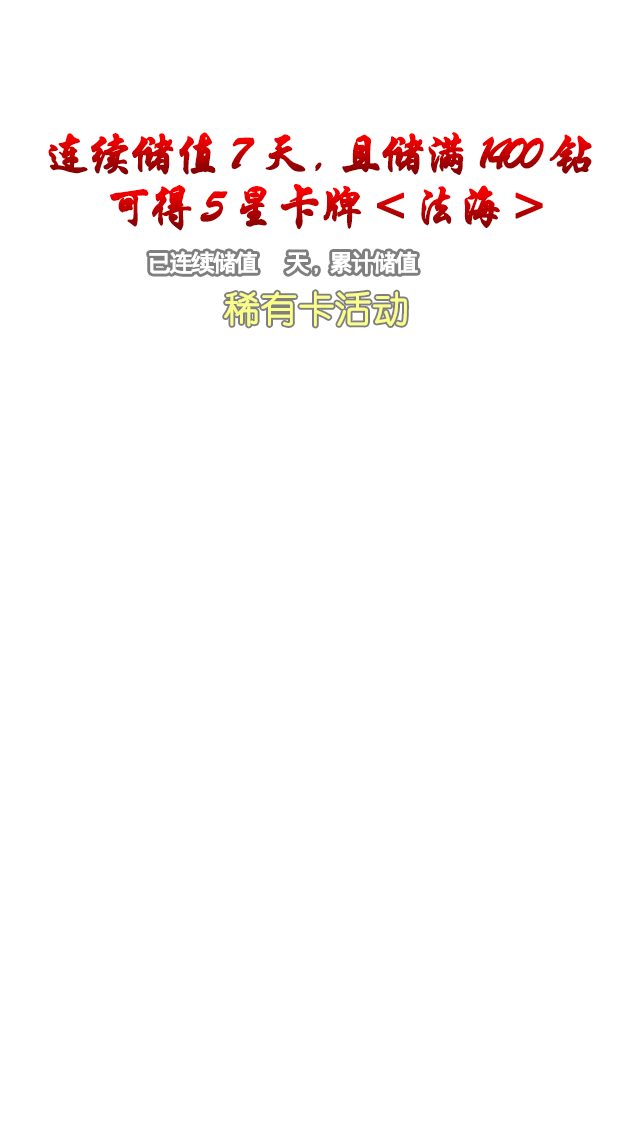
<style>
.page{position:relative;width:640px;height:1136px;background:#ffffff}
.page>*{position:absolute;margin:0}
.t1{font:48px "STXingkai";letter-spacing:-0.12em;font-weight:bold}
.t2{font:24px "SimHei";letter-spacing:-0.12em;color:#ffffff;font-weight:bold}
.t3{font:36px "YouYuan";color:#fbff89;font-weight:bold}
</style>
<div class="page">
<p class="t1" style="left:48px;top:132px;width:544px;height:43px">连续储值7天,且储满1400钻</p>
<p class="t1" style="left:110px;top:184px;width:433px;height:47px">可得5星卡牌&lt;法海&gt;</p>
<p class="t2" style="left:149px;top:251px;width:269px;height:23px">已连续储值   天,累计储值</p>
<p class="t3" style="left:224px;top:291px;width:183px;height:36px">稀有卡活动</p>
</div>
